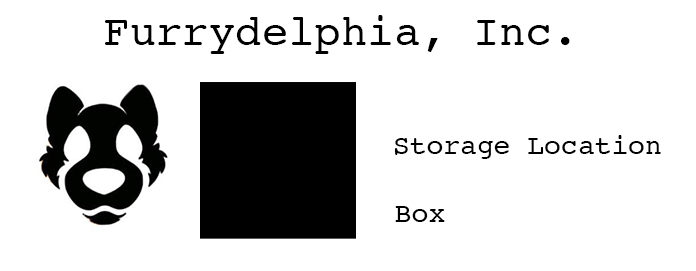
<style>
.page{position:relative;width:696px;height:271px;background:#ffffff}
.page>*{position:absolute;margin:0}
.t1{font:44px "Courier";color:#000000}
.t2{font:28px "Courier";color:#000000}
</style>
<div class="page">
<p class="t1" style="left:105px;top:15px;width:465px;height:39px">Furrydelphia, Inc.</p>
<p class="t2" style="left:394px;top:135px;width:267px;height:24px">Storage Location</p>
<p class="t2" style="left:395px;top:206px;width:50px;height:16px">Box</p>
</div>
